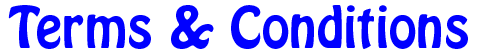
<style>
.page{position:relative;width:500px;height:55px;background:#ffffff}
.page>*{position:absolute;margin:0}
.t1{font:50px "HoboStd";color:#0000ff}
</style>
<div class="page">
<p class="t1" style="left:8px;top:5px;width:460px;height:44px">Terms &amp; Conditions</p>
</div>
